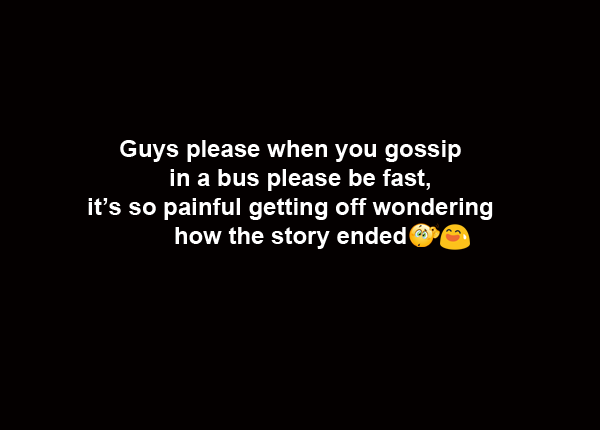
<style>
.page{position:relative;width:600px;height:430px;background:#040000}
.page>*{position:absolute;margin:0}
.t1{font:24px "Arial-BoldMT";color:#ffffff}
</style>
<div class="page">
<p class="t1" style="left:88px;top:140px;width:405px;height:109px;text-align:center">Guys please when you gossip <br>   in a bus please be fast, <br>it’s so painful getting off wondering <br>how the story ended</p>
</div>
